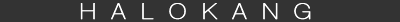
<style>
.page{position:relative;width:400px;height:22px;background:#333333}
.page>*{position:absolute;margin:0}
.t1{font:22px "HelveticaNeueLTStd-UltLt";letter-spacing:0.69em;color:#ffffff;font-weight:bold;scale:1.05 1}
</style>
<div class="page">
<p class="t1" style="left:80px;top:3px;width:231px;height:17px">HALOKANG</p>
</div>
